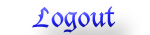
<style>
.page{position:relative;width:150px;height:35px;background:#ffffff}
.page>*{position:absolute;margin:0}
.t1{font:26.9px "LucidaBlackletter"}
</style>
<div class="page">
<p class="t1" style="left:32px;top:6px;width:84px;height:27px">Logout</p>
</div>
